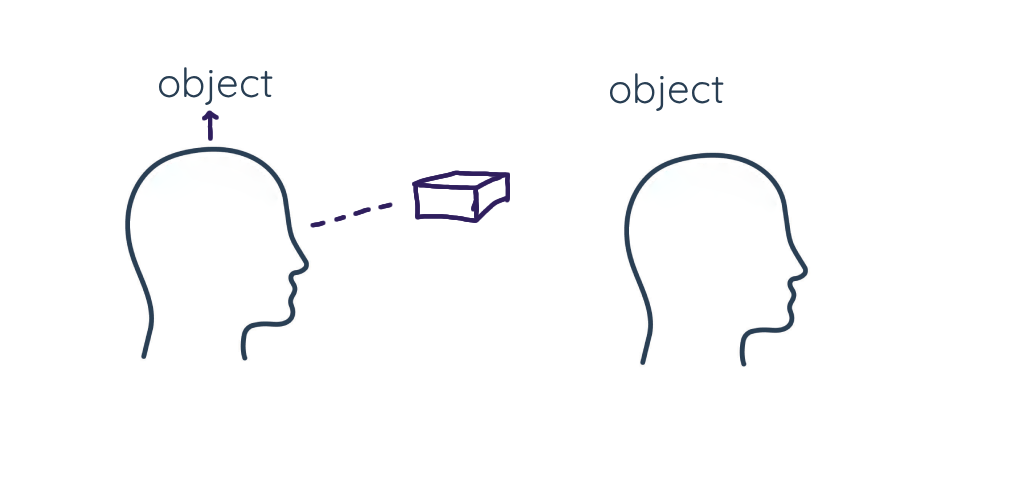
<style>
.page{position:relative;width:1024px;height:480px;background:#ffffff}
.page>*{position:absolute;margin:0}
.t1{font:40.3px "Quicksand-Regular";color:#283e53}
</style>
<div class="page">
<p class="t1" style="left:158px;top:67px;width:115px;height:38px">object</p>
<p class="t1" style="left:609px;top:73px;width:115px;height:38px">object</p>
</div>
